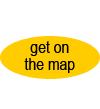
<style>
.page{position:relative;width:100px;height:109px;background:#ffffff}
.page>*{position:absolute;margin:0}
.t1{font:15.5px "ArialMT";color:#000000;scale:0.9 1}
</style>
<div class="page">
<p class="t1" style="left:24px;top:41px;width:51px;height:32px;text-align:center">get on<br>the map</p>
</div>
